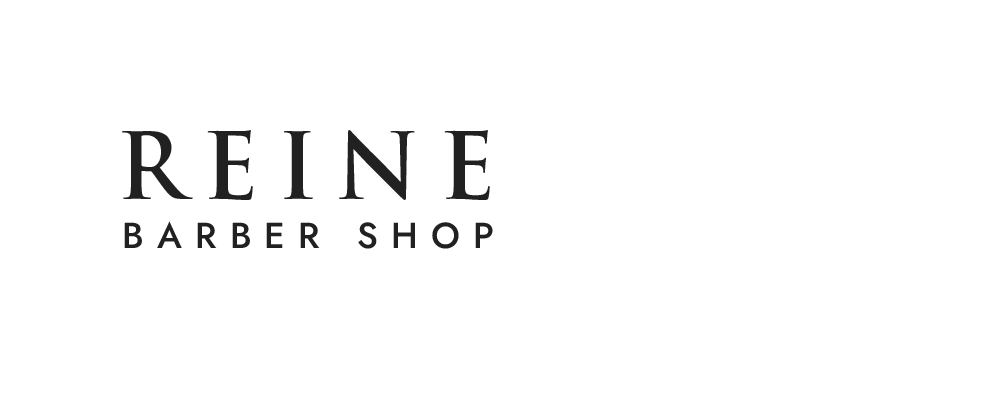
<style>
.page{position:relative;width:1000px;height:400px;background:#ffffff}
.page>*{position:absolute;margin:0}
.t1{font:90px "TrajanPro-Bold";letter-spacing:0.2em;color:#212121;text-transform:uppercase}
.t2{font:36px "Jost-Medium";letter-spacing:0.368em;color:#212121;text-transform:uppercase}
</style>
<div class="page">
<p class="t1" style="left:122px;top:130px;width:368px;height:70px">REINE</p>
<p class="t2" style="left:124px;top:221px;width:369px;height:28px">BARBER SHOP</p>
</div>
